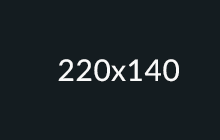
<style>
.page{position:relative;width:220px;height:140px;background:#141c20}
.page>*{position:absolute;margin:0}
.t1{font:30px "Lato-Medium";letter-spacing:0.014em;color:#f9f9f9}
</style>
<div class="page">
<p class="t1" style="left:58px;top:59px;width:121px;height:23px">220x140</p>
</div>
